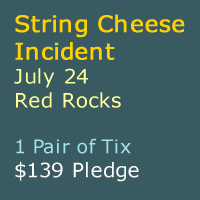
<style>
.page{position:relative;width:200px;height:200px;background:#395a61}
.page>*{position:absolute;margin:0}
.t1{font:23px "Verdana";letter-spacing:0.018em;color:#fed200;font-weight:bold}
.t2{font:20px "Verdana";letter-spacing:0.018em;color:#ffff99}
.t3{font:19px "Verdana";letter-spacing:0.018em;color:#a3e2ee}
.t4{font:20px "Verdana";letter-spacing:0.018em;color:#fdfdfc}
</style>
<div class="page">
<p class="t1" style="left:14px;top:14px;width:171px;height:168px">String Cheese<br>Incident<br><span class="t2">July 24<br>Red Rocks<br></span><span class="t3"><br>1 Pair of Tix<br></span><span class="t4">$139 Pledge</span></p>
</div>
